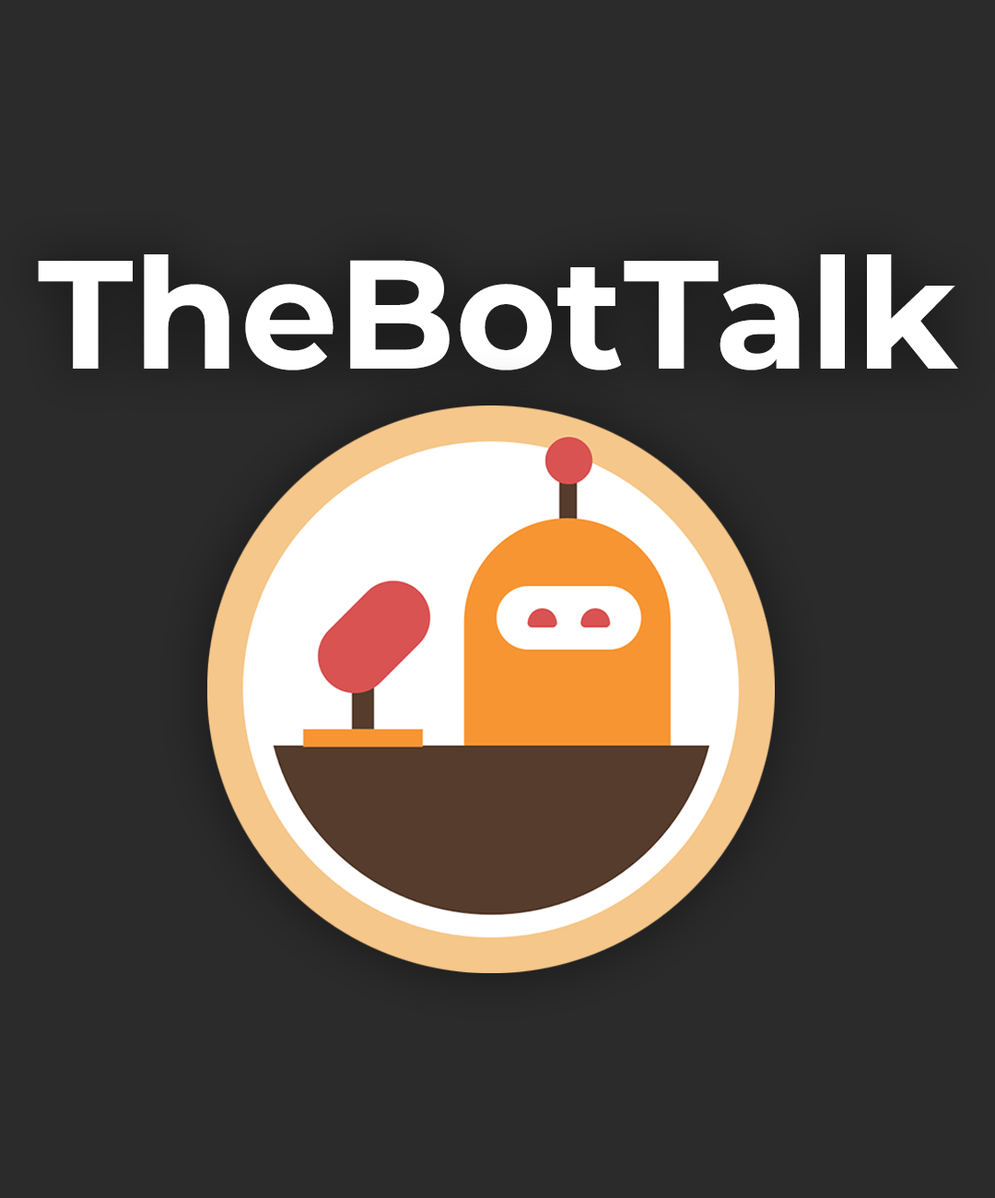
<style>
.page{position:relative;width:995px;height:1198px;background:#2b2b2b}
.page>*{position:absolute;margin:0}
.t1{font:154.1px "Montserrat-Bold";color:#ffffff}
</style>
<div class="page">
<p class="t1" style="left:38px;top:254px;width:920px;height:116px">TheBotTalk</p>
</div>
